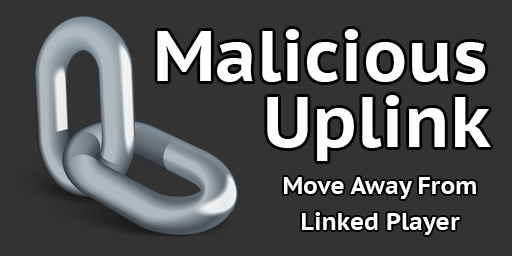
<style>
.page{position:relative;width:512px;height:256px;background:#333333}
.page>*{position:absolute;margin:0}
.t1{font:72px/66px "PTSans-CaptionBold";color:#ffffff}
.t2{font:24px/36px "PTSans-CaptionBold";color:#ffffff}
</style>
<div class="page">
<p class="t1" style="left:157px;top:29px;width:334px;height:132px;text-align:right">Malicious<br>Uplink</p>
<p class="t2" style="left:284px;top:177px;width:192px;height:58px;text-align:center">Move Away From<br>Linked Player</p>
</div>
